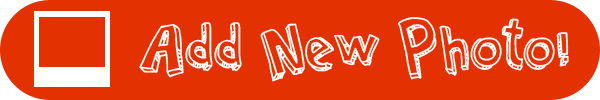
<style>
.page{position:relative;width:600px;height:100px;background:#e43101}
.page>*{position:absolute;margin:0}
.t1{font:70px "CartoonRelief";color:#ffffff}
</style>
<div class="page">
<p class="t1" style="left:139px;top:17px;width:430px;height:65px">Add New Photo!</p>
</div>
